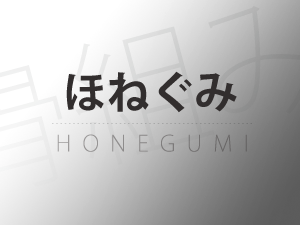
<style>
.page{position:relative;width:300px;height:225px}
.page>*{position:absolute;margin:0}
.t1{font:43.7px "KozGoPr6N-Bold";color:#322f2f}
.t2{font:6px "KozGoPr6N-ExtraLight";letter-spacing:0.072em}
.t3{font:22px "KozGoPr6N-ExtraLight";letter-spacing:0.522em;color:#8e8c8c;text-transform:uppercase}
</style>
<div class="page">
<p class="t1" style="left:66px;top:71px;width:171px;height:42px">ほねぐみ</p>
<p class="t2" style="left:52px;top:123px;width:200px;height:1px">- - - - - - - - - - - - - - - - - - - - - - - - - - - - - - - - - - - - - - - - - - - - - - - -</p>
<p class="t3" style="left:57px;top:134px;width:190px;height:18px">honegumi</p>
</div>
